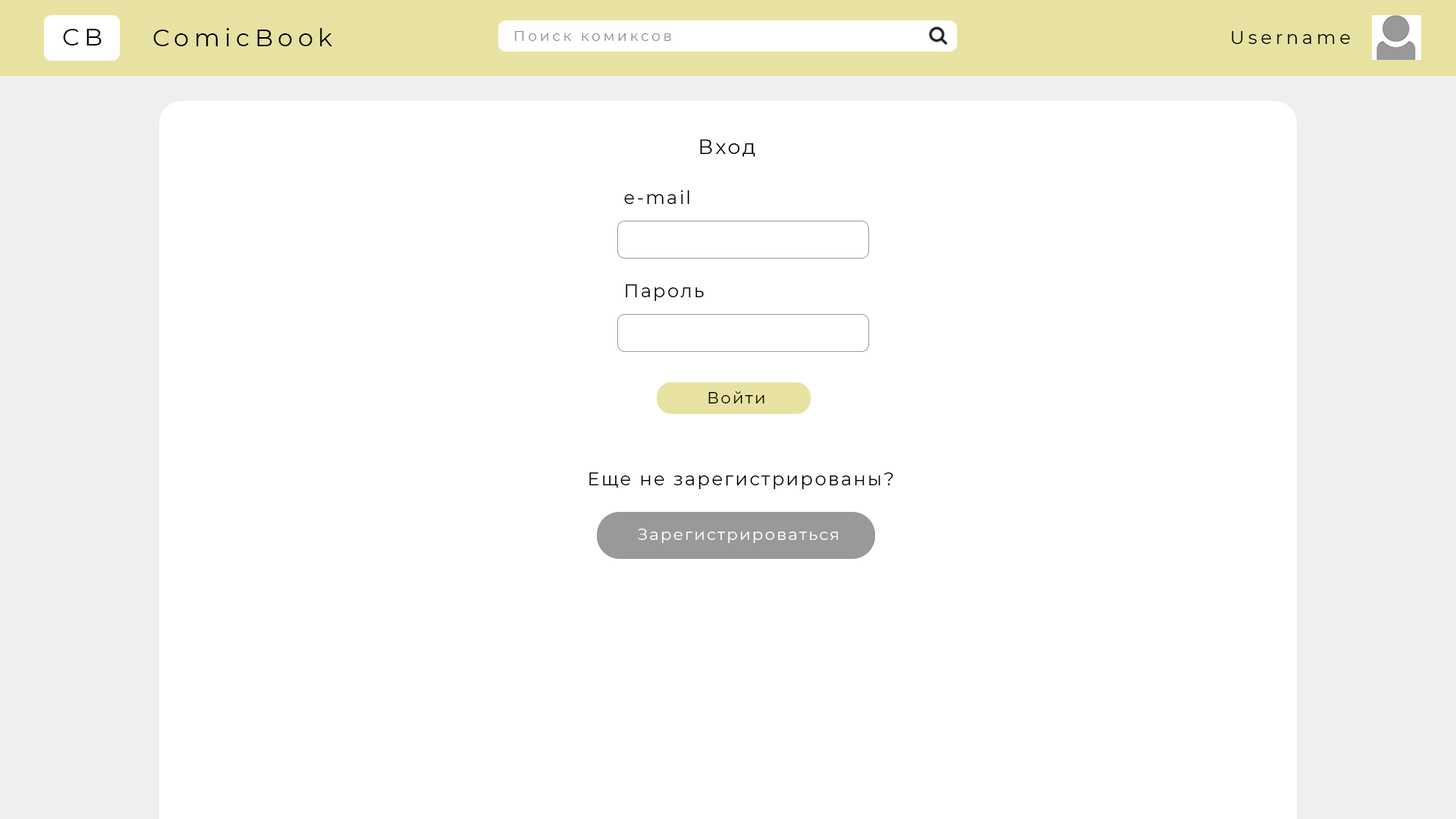
<style>
.page{position:relative;width:1456px;height:819px;background:#ffffff}
.page>*{position:absolute;margin:0}
.t1{font:24.3px "Montserrat-Regular";letter-spacing:0.2em;color:#000000}
.t2{font:14.2px "Montserrat-Regular";letter-spacing:0.2em;color:#8d8d8d}
.t3{font:18.2px "Montserrat-Regular";letter-spacing:0.2em;color:#000000}
.t4{font:20.2px "Montserrat-Regular";letter-spacing:0.1em;color:#000000}
.t5{font:18.2px "Montserrat-Regular";letter-spacing:0.1em;color:#000000}
.t6{font:16.2px "Montserrat-Regular";letter-spacing:0.1em;color:#000000}
.t7{font:16.2px "Montserrat-Regular";letter-spacing:0.1em;color:#ffffff}
</style>
<div class="page">
<p class="t1" style="left:63px;top:29px;width:39px;height:16px">CB</p>
<p class="t1" style="left:153px;top:28px;width:179px;height:18px">ComicBook</p>
<p class="t2" style="left:515px;top:31px;width:156px;height:10px">Поиск комиксов</p>
<p class="t3" style="left:1232px;top:31px;width:118px;height:13px">Username</p>
<p class="t4" style="left:700px;top:140px;width:55px;height:17px">Вход</p>
<p class="t5" style="left:624px;top:190px;width:65px;height:14px">e-mail</p>
<p class="t5" style="left:626px;top:284px;width:78px;height:17px">Пароль</p>
<p class="t6" style="left:708px;top:391px;width:56px;height:12px">Войти</p>
<p class="t5" style="left:589px;top:472px;width:304px;height:17px">Еще не зарегистрированы?</p>
<p class="t7" style="left:638px;top:529px;width:200px;height:14px">Зарегистрироваться</p>
</div>
